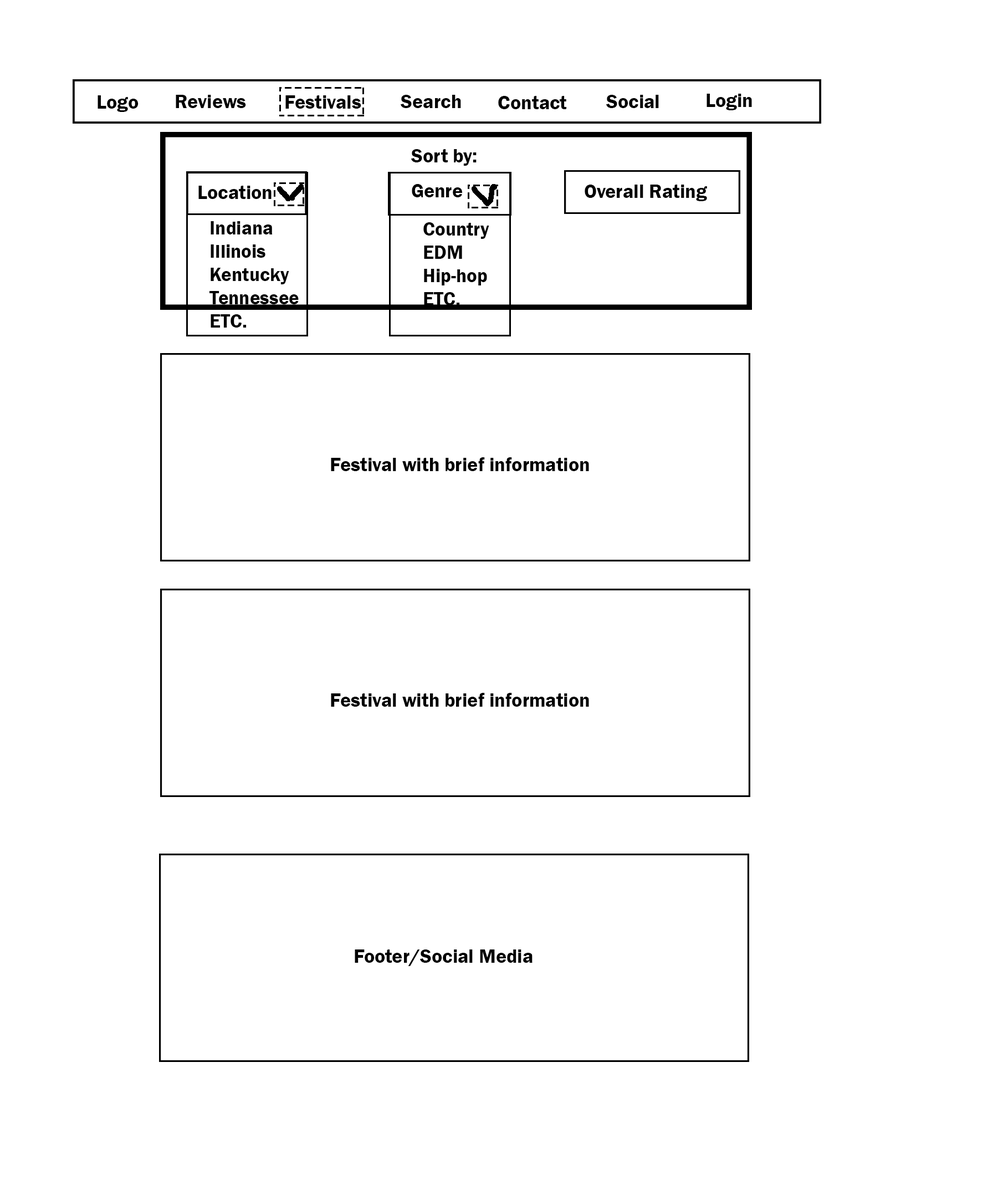
<style>
.page{position:relative;width:998px;height:1195px;background:#ffffff}
.page>*{position:absolute;margin:0}
.t1{font:19.8px "FranklinGothic-Demi";color:#000000}
.t2{font:19.4px "FranklinGothic-Demi";color:#000000}
</style>
<div class="page">
<p class="t1" style="left:98px;top:95px;width:41px;height:17px">Logo</p>
<p class="t1" style="left:176px;top:95px;width:70px;height:13px">Reviews</p>
<p class="t1" style="left:285px;top:95px;width:76px;height:14px">Festivals</p>
<p class="t1" style="left:401px;top:95px;width:60px;height:13px">Search</p>
<p class="t1" style="left:498px;top:96px;width:69px;height:13px">Contact</p>
<p class="t1" style="left:606px;top:95px;width:53px;height:13px">Social</p>
<p class="t1" style="left:707px;top:94px;width:45px;height:16px">Login</p>
<p class="t1" style="left:411px;top:149px;width:66px;height:17px">Sort by:</p>
<p class="t1" style="left:198px;top:186px;width:74px;height:13px">Location</p>
<p class="t1" style="left:412px;top:184px;width:51px;height:13px">Genre</p>
<p class="t1" style="left:585px;top:185px;width:122px;height:16px">Overall Rating</p>
<p class="t2" style="left:209px;top:221px;width:90px;height:107px">Indiana<br>Illinois<br>Kentucky<br>Tennessee<br>ETC.</p>
<p class="t2" style="left:423px;top:222px;width:66px;height:83px">Country<br>EDM<br>Hip-hop<br>ETC.</p>
<p class="t1" style="left:331px;top:457px;width:258px;height:14px">Festival with brief information</p>
<p class="t1" style="left:331px;top:693px;width:258px;height:14px">Festival with brief information</p>
<p class="t1" style="left:355px;top:949px;width:178px;height:17px">Footer/Social Media</p>
</div>
